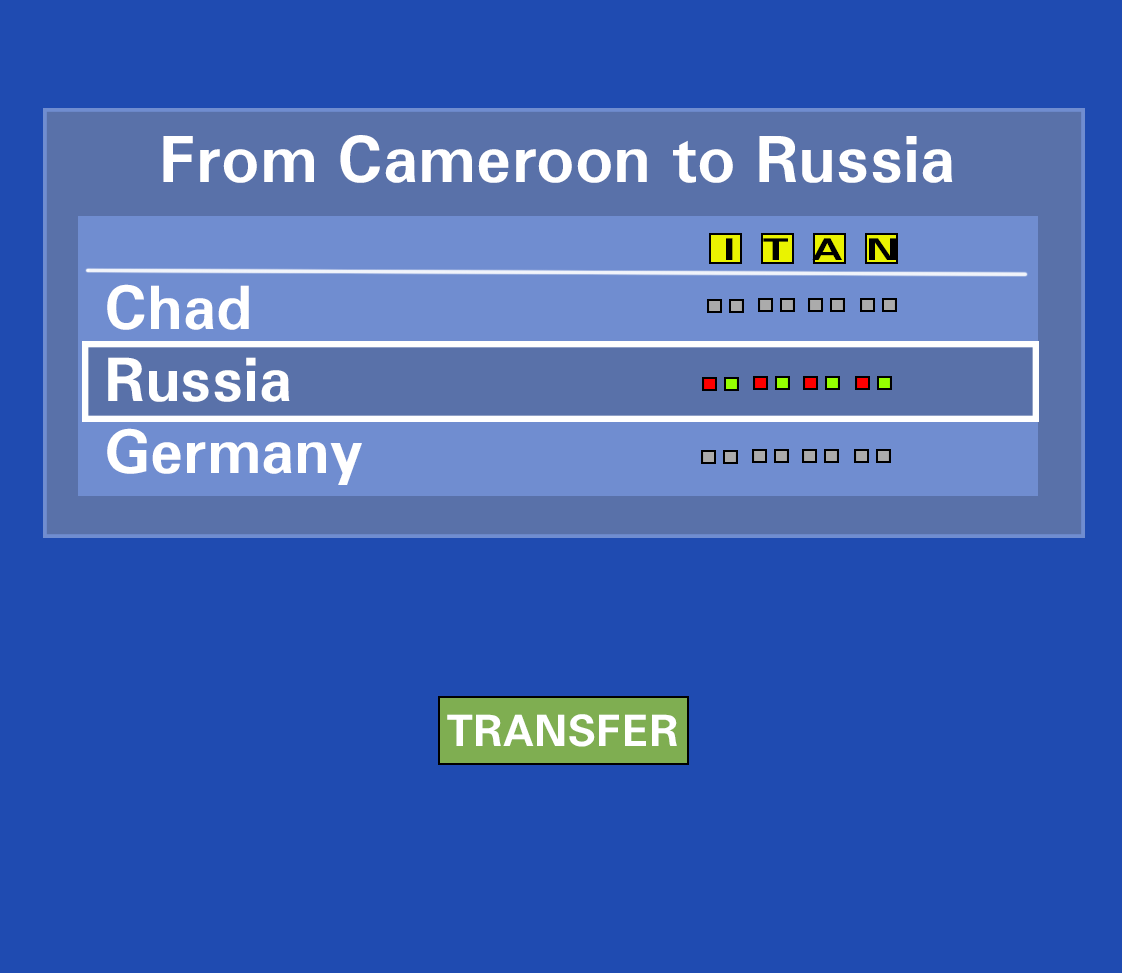
<style>
.page{position:relative;width:1122px;height:973px;background:#1f4bb1}
.page>*{position:absolute;margin:0}
.t1{font:63.7px "FreeUniversal-Bold";color:#ffffff}
.t2{font:30px "FreeUniversal-Bold";letter-spacing:-0.025em;color:#000000;scale:1.43 1}
.t3{font:30px "FreeUniversal-Bold";letter-spacing:0.01em;color:#000000;scale:1.43 1}
.t4{font:30px "FreeUniversal-Bold";letter-spacing:-0.01em;color:#000000;scale:1.43 1}
.t5{font:60px "FreeUniversal-Bold";color:#ffffff}
.t6{font:43.2px "FreeUniversal-Bold";color:#ffffff}
</style>
<div class="page">
<p class="t1" style="left:163px;top:135px;width:790px;height:48px">From Cameroon to Russia</p>
<p class="t2" style="left:726px;top:238px;width:170px;height:22px"><span class="t3">I  </span>T  A<span class="t4">  N</span></p>
<p class="t5" style="left:107px;top:284px;width:255px;height:201px">Chad<br>Russia<br>Germany</p>
<p class="t6" style="left:447px;top:714px;width:230px;height:33px">TRANSFER</p>
</div>
